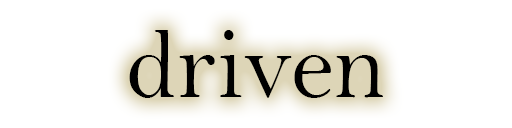
<style>
.page{position:relative;width:512px;height:128px;background:#ffffff}
.page>*{position:absolute;margin:0}
.t1{font:100px "BellMT";color:#000000}
</style>
<div class="page">
<p class="t1" style="left:129px;top:30px;width:254px;height:68px">driven</p>
</div>
